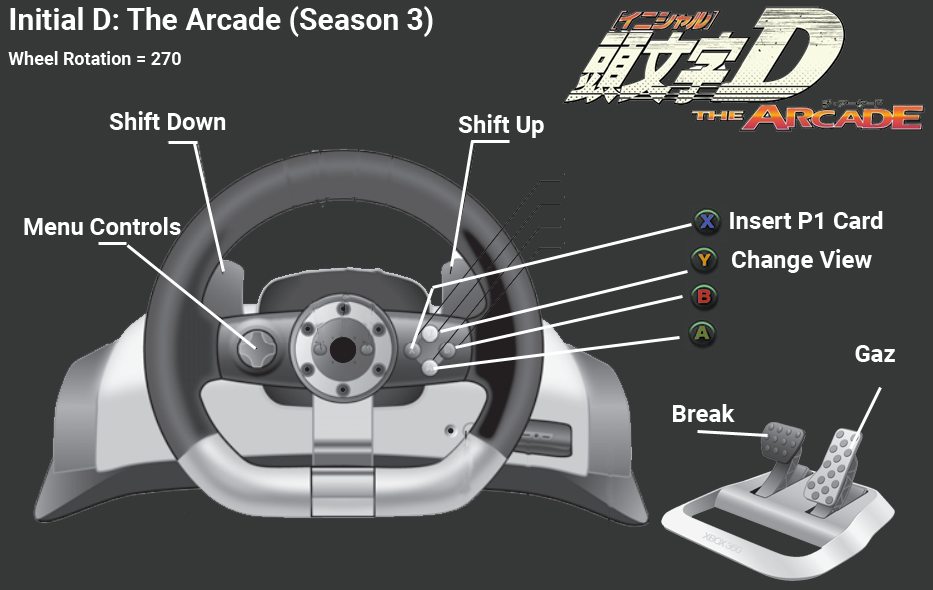
<style>
.page{position:relative;width:933px;height:590px;background:#363838}
.page>*{position:absolute;margin:0}
.t1{font:30px "Roboto-Bold";color:#ffffff}
.t2{font:18px "Roboto-Bold";color:#ffffff}
.t3{font:24px "Roboto-Bold";color:#ffffff}
</style>
<div class="page">
<p class="t1" style="left:10px;top:6px;width:423px;height:31px">Initial D: The Arcade (Season 3)</p>
<p class="t2" style="left:8px;top:51px;width:173px;height:14px">Wheel Rotation = 270</p>
<p class="t3" style="left:109px;top:111px;width:117px;height:19px">Shift Down</p>
<p class="t3" style="left:458px;top:114px;width:86px;height:24px">Shift Up</p>
<p class="t3" style="left:24px;top:217px;width:157px;height:18px">Menu Controls</p>
<p class="t3" style="left:730px;top:211px;width:153px;height:18px">Insert P1 Card</p>
<p class="t3" style="left:732px;top:249px;width:140px;height:24px">Change View</p>
<p class="t3" style="left:855px;top:345px;width:40px;height:17px">Gaz</p>
<p class="t3" style="left:673px;top:404px;width:62px;height:18px">Break</p>
</div>
